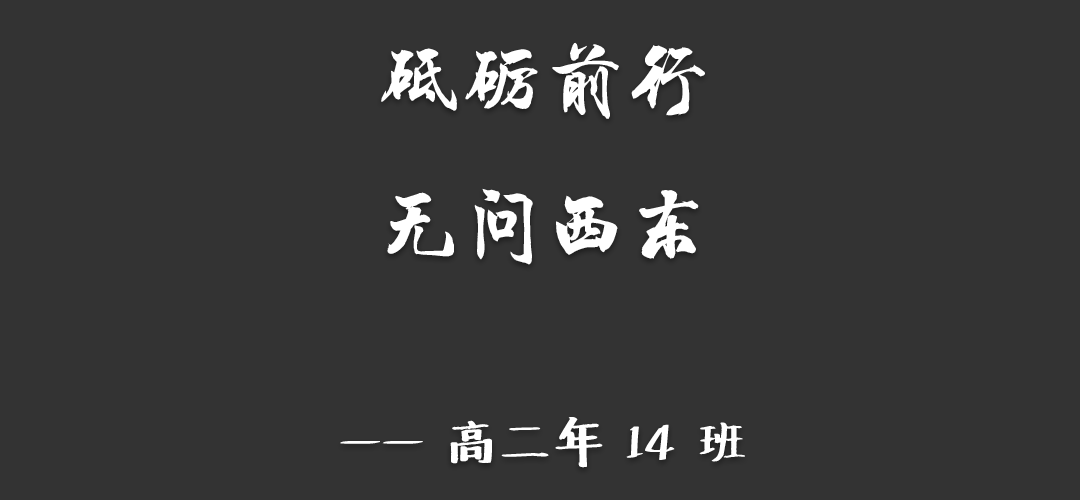
<style>
.page{position:relative;width:1080px;height:500px;background:#333333}
.page>*{position:absolute;margin:0}
.t1{font:50px "Undefined";color:#ffffff}
.t2{font:83.3px "HYChengXingJ";color:#ffffff}
</style>
<div class="page">
<p class="t1" style="left:340px;top:42px;width:405px;height:426px;text-align:center"><span class="t2">砥砺前行<br>无问西东<br></span><br>—— 高二年 14 班</p>
</div>
